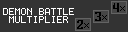
<style>
.page{position:relative;width:128px;height:32px;background:#333333}
.page>*{position:absolute;margin:0}
.t1{font:10px "Terminal";color:#ffffff}
</style>
<div class="page">
<p class="t1" style="left:3px;top:8px;width:71px;height:7px">DEMON BATTLE</p>
<p class="t1" style="left:9px;top:16px;width:59px;height:7px">MULTIPLIER</p>
</div>
